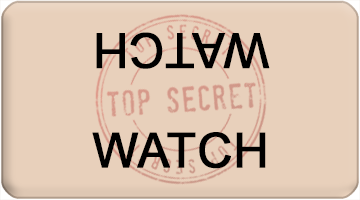
<style>
.page{position:relative;width:360px;height:200px;background:#e8d0bb}
.page>*{position:absolute;margin:0}
.t1{font:48px "ArialMT";color:#000000;font-weight:bold}
</style>
<div class="page">
<p class="t1" style="left:96px;top:32px;width:174px;height:37px;rotate:180deg">WATCH</p>
<p class="t1" style="left:92px;top:132px;width:174px;height:37px">WATCH</p>
</div>
